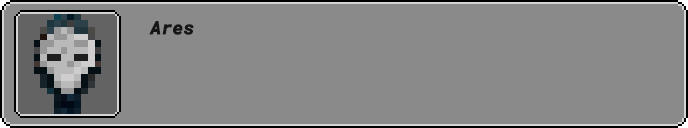
<style>
.page{position:relative;width:688px;height:128px;background:#8a8a8a}
.page>*{position:absolute;margin:0}
.t1{font:18px "RobotoMono-BoldItalic";color:#161616;font-weight:bold}
</style>
<div class="page">
<p class="t1" style="left:149px;top:21px;width:45px;height:14px">Ares</p>
</div>
